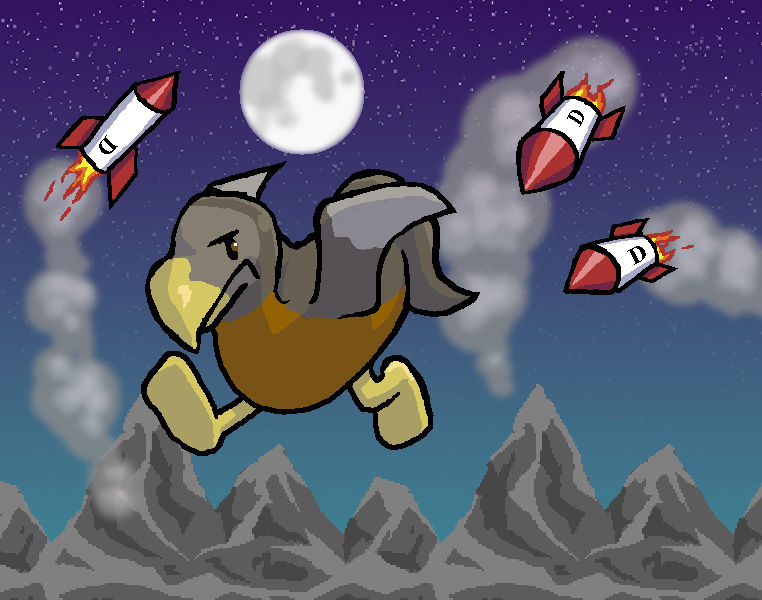
<style>
.page{position:relative;width:762px;height:600px}
.page>*{position:absolute;margin:0}
.t1{font:24px "TimesNewRomanPS-BoldMT";letter-spacing:0.075em;color:#000000;scale:0.82 1}
.t2{font:24px "TimesNewRomanPS-BoldMT";letter-spacing:0.075em;color:#000000}
</style>
<div class="page">
<p class="t1" style="left:567px;top:110px;width:17px;height:17px;rotate:-62deg">D</p>
<p class="t2" style="left:99px;top:135px;width:19px;height:19px;rotate:133deg">D</p>
<p class="t2" style="left:627px;top:246px;width:19px;height:19px;rotate:-28deg">D</p>
</div>
